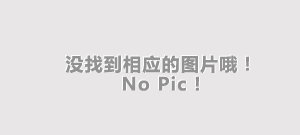
<style>
.page{position:relative;width:300px;height:135px;background:#e8e6e7}
.page>*{position:absolute;margin:0}
.t1{font:18px/20px "MicrosoftYaHei";letter-spacing:0.068em}
.t2{font:18px/20px "MicrosoftYaHei";letter-spacing:0.068em;color:#929292}
</style>
<div class="page">
<p class="t1" style="left:64px;top:54px;width:185px;height:36px;text-align:center">没找到相应的图片哦！<br>No Pic !</p>
<p class="t2" style="left:65px;top:55px;width:185px;height:36px;text-align:center">没找到相应的图片哦！<br>No Pic !</p>
<p class="t2" style="left:66px;top:55px;width:185px;height:36px;text-align:center">没找到相应的图片哦！<br>No Pic !</p>
</div>
